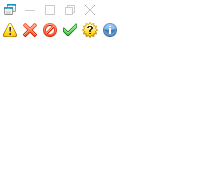
<style>
.page{position:relative;width:200px;height:180px;background:#ffffff}
.page>*{position:absolute;margin:0}
.t1{font:11px "ArialMT";color:#333333;font-weight:bold}
.t2{font:11px "ArialMT";color:#ffffff;font-weight:bold}
</style>
<div class="page">
<p class="t1" style="left:87px;top:26px;width:6px;height:8px">?</p>
<p class="t2" style="left:109px;top:26px;width:2px;height:8px">i</p>
</div>
